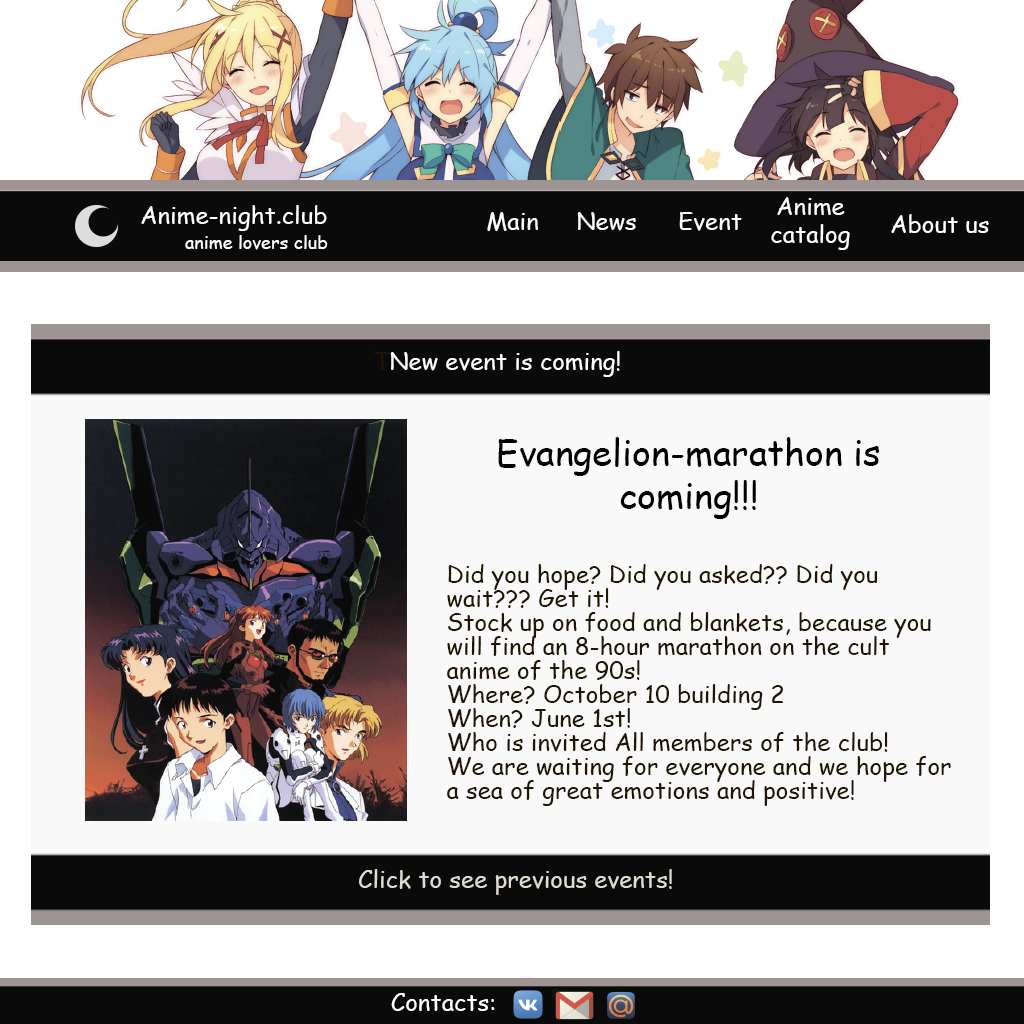
<style>
.page{position:relative;width:1024px;height:1024px;background:#faf9f9}
.page>*{position:absolute;margin:0}
.t1{font:24px "ComicSansMS";color:#ffffff}
.t2{font:18px "ComicSansMS";color:#ffffff}
.t3{font:24px "ComicSansMS";color:#201600}
.t4{font:36px "ComicSansMS";color:#000000}
.t5{font:24px/24px "ComicSansMS";color:#201600}
.t6{font:24px "ComicSansMS";color:#e1dcd2}
</style>
<div class="page">
<p class="t1" style="left:771px;top:197px;width:79px;height:53px;text-align:center">Anime<br>catalog</p>
<p class="t1" style="left:141px;top:205px;width:186px;height:26px">Anime-night.club</p>
<p class="t1" style="left:487px;top:212px;width:51px;height:19px">Main</p>
<p class="t1" style="left:577px;top:212px;width:59px;height:19px">News</p>
<p class="t1" style="left:679px;top:212px;width:63px;height:19px">Event</p>
<p class="t1" style="left:891px;top:214px;width:98px;height:19px">About us</p>
<p class="t2" style="left:185px;top:235px;width:143px;height:15px">anime lovers club</p>
<p class="t1" style="left:374px;top:351px;width:246px;height:26px"><span class="t3">Т</span>New event is coming!</p>
<p class="t4" style="left:498px;top:437px;width:382px;height:82px;text-align:center">Evangelion-marathon is coming!!!</p>
<p class="t5" style="left:447px;top:564px;width:504px;height:242px">Did you hope? Did you asked?? Did you wait??? Get it!<br>Stock up on food and blankets, because you will find an 8-hour marathon on the cult anime of the 90s!<br>Where? October 10 building 2<br>When? June 1st!<br>Who is invited All members of the club!<br>We are waiting for everyone and we hope for a sea of ​​great emotions and positive!</p>
<p class="t6" style="left:359px;top:869px;width:313px;height:26px">Click to see previous events!</p>
<p class="t1" style="left:391px;top:993px;width:104px;height:18px">Contacts:</p>
</div>
